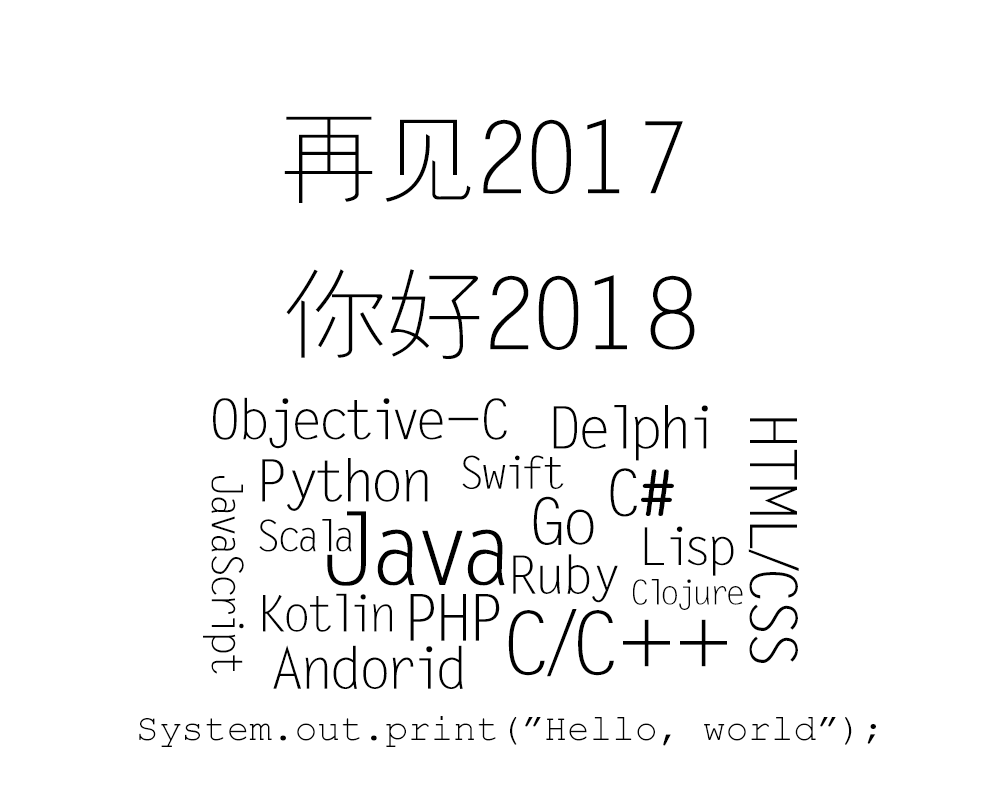
<style>
.page{position:relative;width:1000px;height:788px;background:#ffffff}
.page>*{position:absolute;margin:0}
.t1{font:100px "FZYXJW--GB1-0";color:#000000}
.t2{font:56.1px "FZYXJW--GB1-0";color:#000000}
.t3{font:58.8px "FZYXJW--GB1-0";color:#000000}
.t4{font:65.1px "FZYXJW--GB1-0";color:#000000}
.t5{font:45.2px "FZYXJW--GB1-0";color:#000000}
.t6{font:65px "FZYXJW--GB1-0";color:#000000}
.t7{font:65px "FZY3JW--GB1-0";color:#000000}
.t8{font:43.4px "FZYXJW--GB1-0";color:#000000}
.t9{font:102.2px "FZYXJW--GB1-0";color:#000000}
.t10{font:52.5px "FZYXJW--GB1-0";color:#000000}
.t11{font:53.4px "FZYXJW--GB1-0";color:#000000}
.t12{font:34.4px "FZYXJW--GB1-0";color:#000000}
.t13{font:50.7px "FZYXJW--GB1-0";color:#000000}
.t14{font:87.7px "FZYXJW--GB1-0";color:#000000}
.t15{font:57.9px "FZYXJW--GB1-0";color:#000000}
.t16{font:37.5px "CourierNewPSMT";color:#000000}
</style>
<div class="page">
<p class="t1" style="left:284px;top:116px;width:399px;height:87px">再见2017</p>
<p class="t1" style="left:286px;top:269px;width:409px;height:90px">你好2018</p>
<p class="t2" style="left:213px;top:397px;width:294px;height:52px">Objective-C</p>
<p class="t3" style="left:553px;top:405px;width:155px;height:56px">Delphi</p>
<p class="t4" style="left:748px;top:418px;width:51px;height:245px;rotate:90deg">HTML/CSS</p>
<p class="t3" style="left:262px;top:458px;width:166px;height:53px">Python</p>
<p class="t5" style="left:462px;top:455px;width:102px;height:34px">Swift</p>
<p class="t6" style="left:610px;top:468px;width:64px;height:49px">C<span class="t7">#</span></p>
<p class="t8" style="left:203px;top:476px;width:41px;height:198px;rotate:90deg">JavaScript</p>
<p class="t6" style="left:533px;top:496px;width:61px;height:49px">Go</p>
<p class="t8" style="left:259px;top:519px;width:93px;height:33px">Scala</p>
<p class="t9" style="left:327px;top:511px;width:178px;height:75px">Java</p>
<p class="t10" style="left:644px;top:526px;width:90px;height:50px">Lisp</p>
<p class="t11" style="left:513px;top:554px;width:105px;height:49px">Ruby</p>
<p class="t12" style="left:633px;top:579px;width:110px;height:31px">Clojure</p>
<p class="t13" style="left:263px;top:593px;width:129px;height:39px">Kotlin</p>
<p class="t6" style="left:410px;top:594px;width:90px;height:47px">PHP</p>
<p class="t14" style="left:508px;top:609px;width:219px;height:68px">C/C++</p>
<p class="t15" style="left:273px;top:645px;width:190px;height:44px">Andorid</p>
<p class="t16" style="left:139px;top:716px;width:737px;height:31px">System.out.print(”Hello, world”);</p>
</div>
